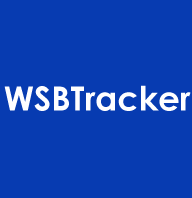
<style>
.page{position:relative;width:192px;height:198px;background:#073bb1}
.page>*{position:absolute;margin:0}
.t1{font:33.4px "CenturyGothic-Bold";color:#fefeff}
</style>
<div class="page">
<p class="t1" style="left:4px;top:85px;width:187px;height:26px">WSBTracker</p>
</div>
